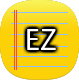
<style>
.page{position:relative;width:79px;height:80px;background:#fcd108}
.page>*{position:absolute;margin:0}
.t1{font:30px "MyriadPro-Regular";color:#ffffff}
</style>
<div class="page">
<p class="t1" style="left:27px;top:29px;width:29px;height:21px">EZ</p>
</div>
